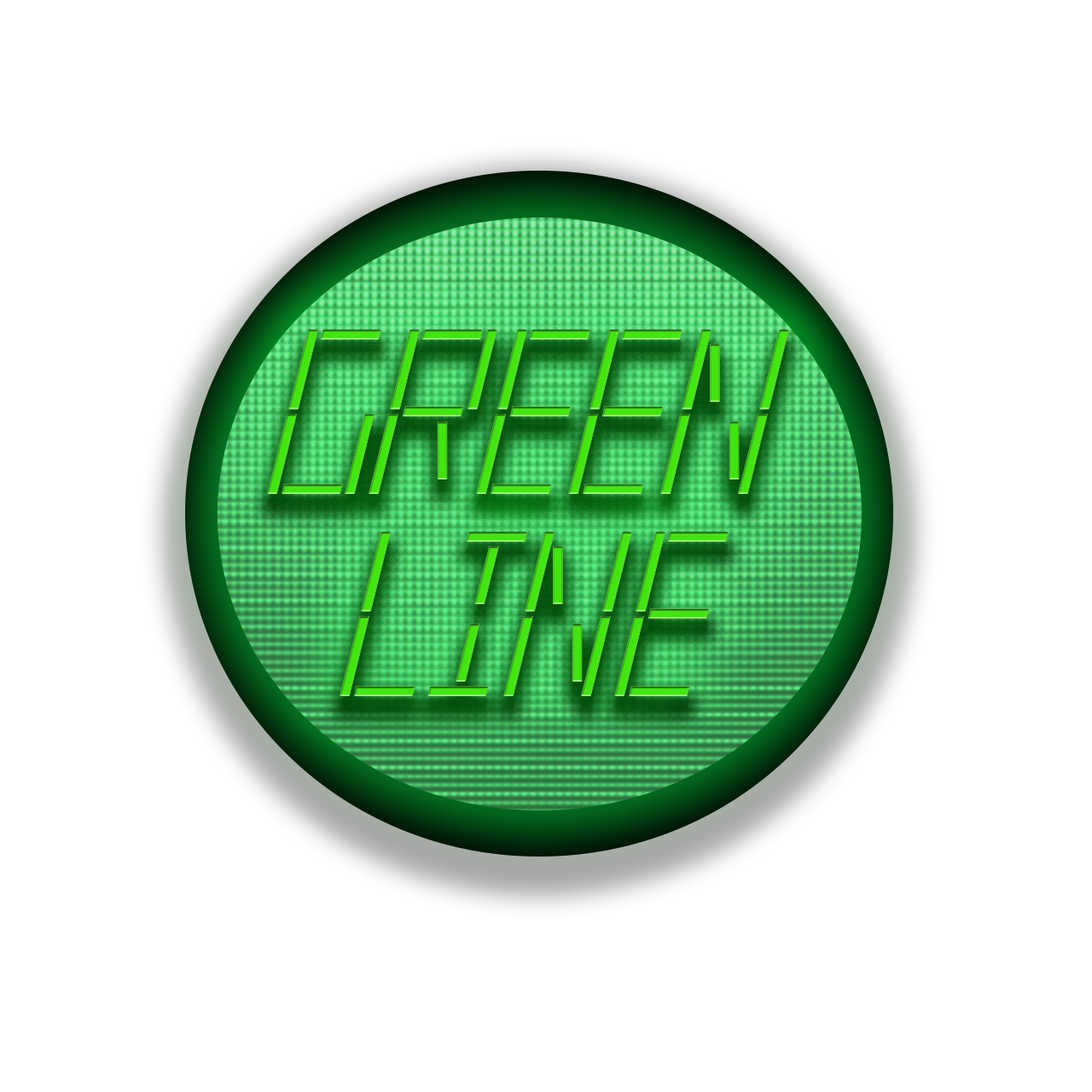
<style>
.page{position:relative;width:1092px;height:1092px;background:#ffffff}
.page>*{position:absolute;margin:0}
.t1{font:248.2px "LEDRealItalic";color:#42e510;text-transform:uppercase}
</style>
<div class="page">
<p class="t1" style="left:267px;top:329px;width:522px;height:165px">GREEN</p>
<p class="t1" style="left:340px;top:531px;width:389px;height:165px">LINE</p>
</div>
